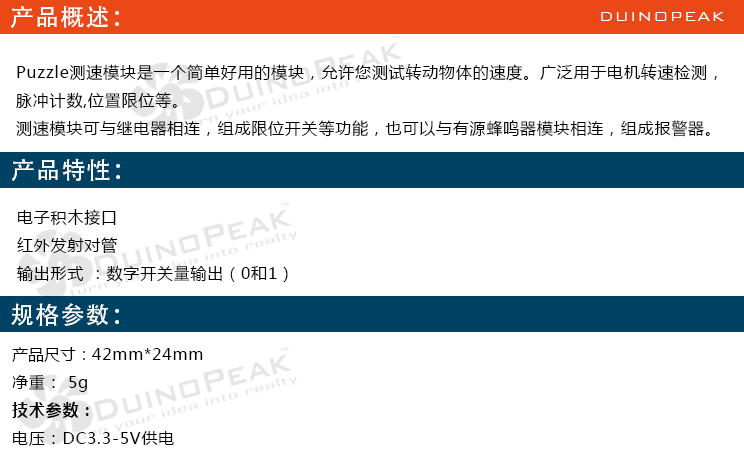
<style>
.page{position:relative;width:744px;height:468px;background:#ffffff}
.page>*{position:absolute;margin:0}
.t1{font:24px "AdobeHeitiStd-Regular";letter-spacing:0.05em;color:#ffffff}
.t2{font:18px "BankGothicBT-Light";letter-spacing:0.05em;color:#ffffff}
.t3{font:16px "MicrosoftYaHei";letter-spacing:0.05em;color:#000000}
.t4{font:16px "MicrosoftYaHei";color:#000000}
.t5{font:16px "MicrosoftYaHei-Bold";letter-spacing:0.05em;color:#000000}
</style>
<div class="page">
<p class="t1" style="left:10px;top:6px;width:109px;height:23px">产品概述：</p>
<p class="t2" style="left:601px;top:12px;width:124px;height:9px">DUINOPEAK</p>
<p class="t3" style="left:16px;top:64px;width:701px;height:73px">Puzzle测速模块是一个简单好用的模块，允许您测试转动物体的速度。广泛用于电机转速检测，<br>脉冲计数,位置限位等。<br>测速模块可与继电器相连，组成限位开关等功能，也可以与有源蜂鸣器模块相连，组成报警器。</p>
<p class="t1" style="left:11px;top:158px;width:109px;height:24px">产品特性：</p>
<p class="t3" style="left:17px;top:209px;width:271px;height:73px">电子积木接口<br>红外发射对管<br>输出形式 ：数字开关量输出（0和1）</p>
<p class="t1" style="left:11px;top:303px;width:108px;height:23px">规格参数：</p>
<p class="t3" style="left:12px;top:347px;width:191px;height:99px"><span class="t4">产品尺寸：</span>42mm*24mm<br>净重： 5g<br><span class="t5">技术参数：<br></span>电压：DC3.3-5V供电</p>
</div>
